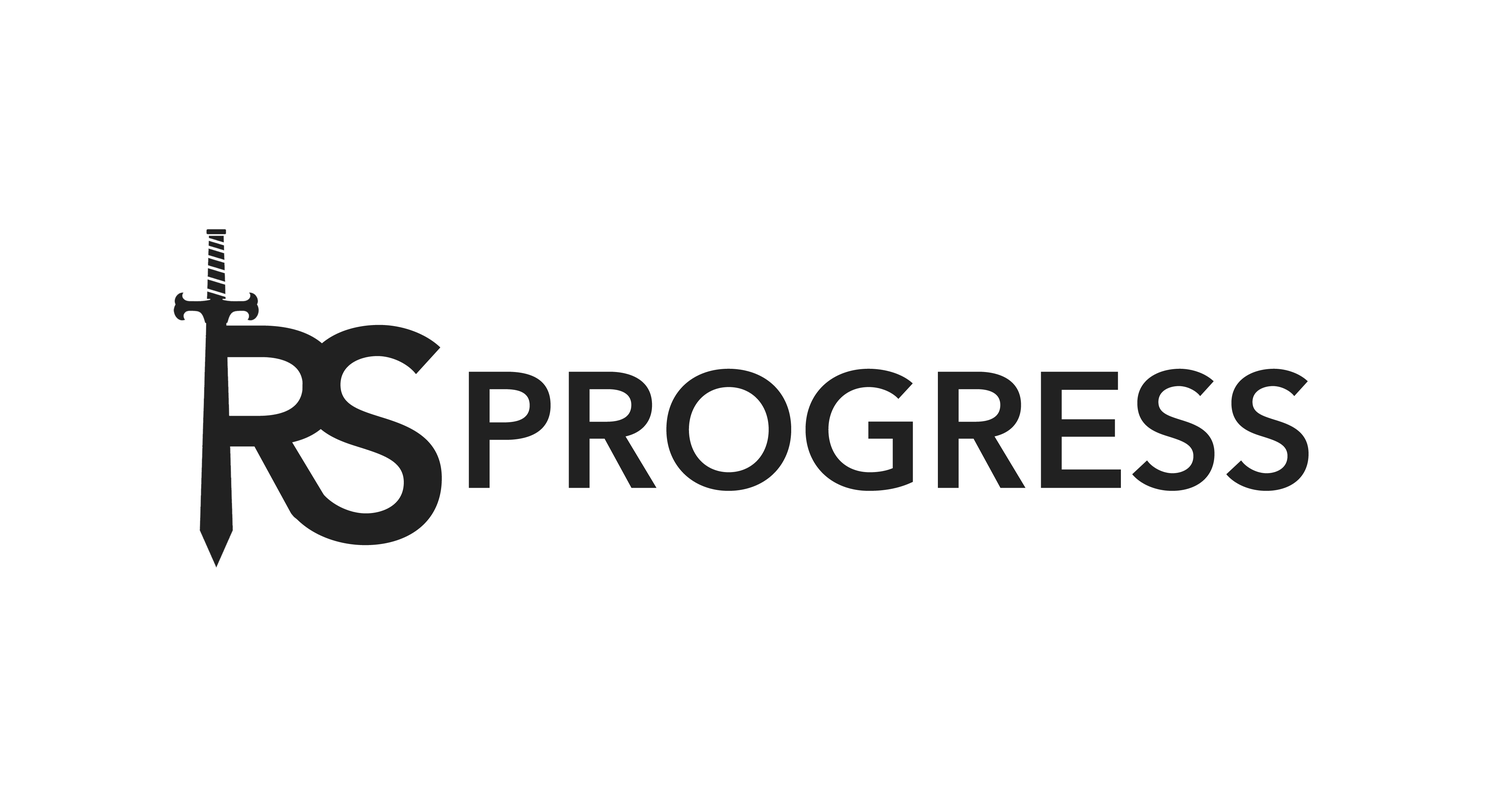
<style>
.page{position:relative;width:1488px;height:801px;background:#ffffff}
.page>*{position:absolute;margin:0}
.t1{font:296px "AvenirNextLTPro-Demi";color:#212121}
.t2{font:164.1px "AvenirNextLTPro-Demi";color:#212121}
</style>
<div class="page">
<p class="t1" style="left:293px;top:325px;width:149px;height:221px">S</p>
<p class="t2" style="left:469px;top:369px;width:840px;height:122px">PROGRESS</p>
</div>
